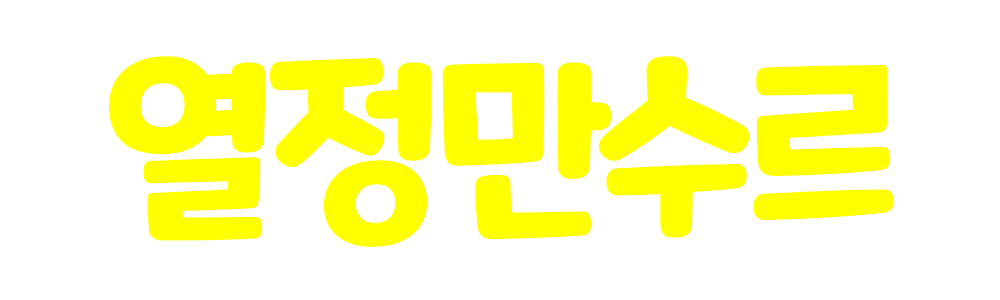
<style>
.page{position:relative;width:1000px;height:300px;background:#ffffff}
.page>*{position:absolute;margin:0}
.t1{font:200px "MaplestoryBold";letter-spacing:-0.05em;color:#ffff00}
</style>
<div class="page">
<p class="t1" style="left:109px;top:56px;width:785px;height:191px">열정만수르</p>
</div>
